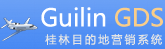
<style>
.page{position:relative;width:165px;height:49px}
.page>*{position:absolute;margin:0}
.t1{font:24px "MicrosoftYaHei";color:#ffffff}
.t2{font:24px "MicrosoftYaHei";color:#facd89}
.t3{font:11px "MicrosoftYaHei";letter-spacing:0.2em;color:#e5e5e5}
</style>
<div class="page">
<p class="t1" style="left:41px;top:7px;width:122px;height:20px">Guilin <span class="t2">GDS</span></p>
<p class="t3" style="left:45px;top:34px;width:117px;height:11px">桂林目的地营销系统</p>
</div>
